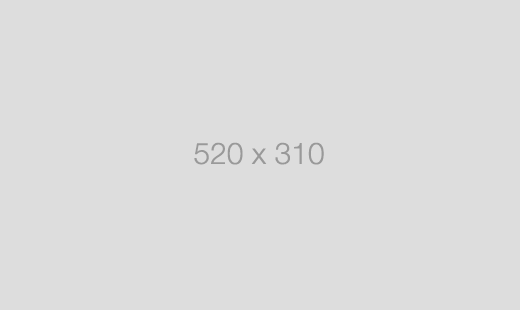
<style>
.page{position:relative;width:520px;height:310px;background:#dddddd}
.page>*{position:absolute;margin:0}
.t1{font:30px "HelveticaNeue-Light";color:#999999}
</style>
<div class="page">
<p class="t1" style="left:194px;top:142px;width:130px;height:23px">520 x 310</p>
</div>
